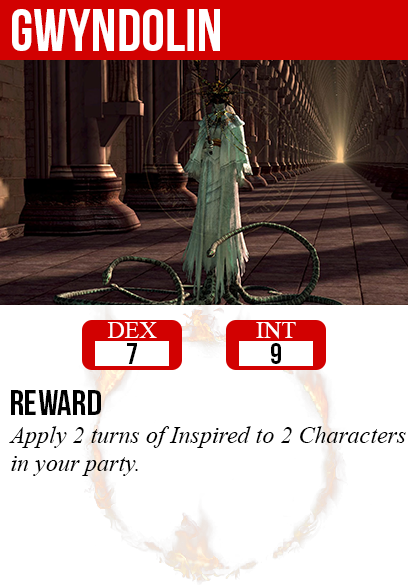
<style>
.page{position:relative;width:408px;height:585px;background:#ffffff}
.page>*{position:absolute;margin:0}
.t1{font:60px "BebasNeue";color:#ffffff}
.t2{font:24px "TimesNewRomanPSMT";color:#ffffff}
.t3{font:30px "BebasNeue";color:#000000}
.t4{font:36px "BebasNeue";color:#000000}
.t5{font:24px "TimesNewRomanPS-ItalicMT";color:#000000}
</style>
<div class="page">
<p class="t1" style="left:12px;top:9px;width:208px;height:42px">gwyndolin</p>
<p class="t2" style="left:107px;top:322px;width:50px;height:16px">DEX</p>
<p class="t2" style="left:256px;top:322px;width:40px;height:17px">INT</p>
<p class="t3" style="left:127px;top:343px;width:10px;height:21px">7</p>
<p class="t3" style="left:271px;top:343px;width:10px;height:21px">9</p>
<p class="t4" style="left:11px;top:390px;width:90px;height:25px">reward</p>
<p class="t5" style="left:9px;top:426px;width:397px;height:50px">Apply 2 turns of Inspired to 2 Characters<br>in your party.</p>
</div>
